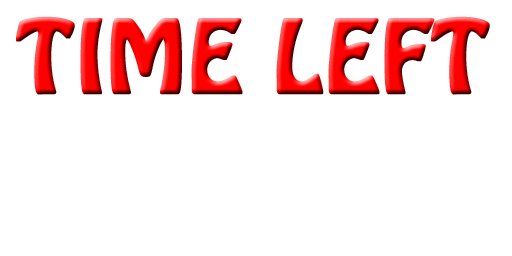
<style>
.page{position:relative;width:512px;height:256px;background:#ffffff}
.page>*{position:absolute;margin:0}
.t1{font:90px "HoboStd";font-weight:bold}
</style>
<div class="page">
<p class="t1" style="left:16px;top:16px;width:474px;height:79px">TIME LEFT</p>
</div>
